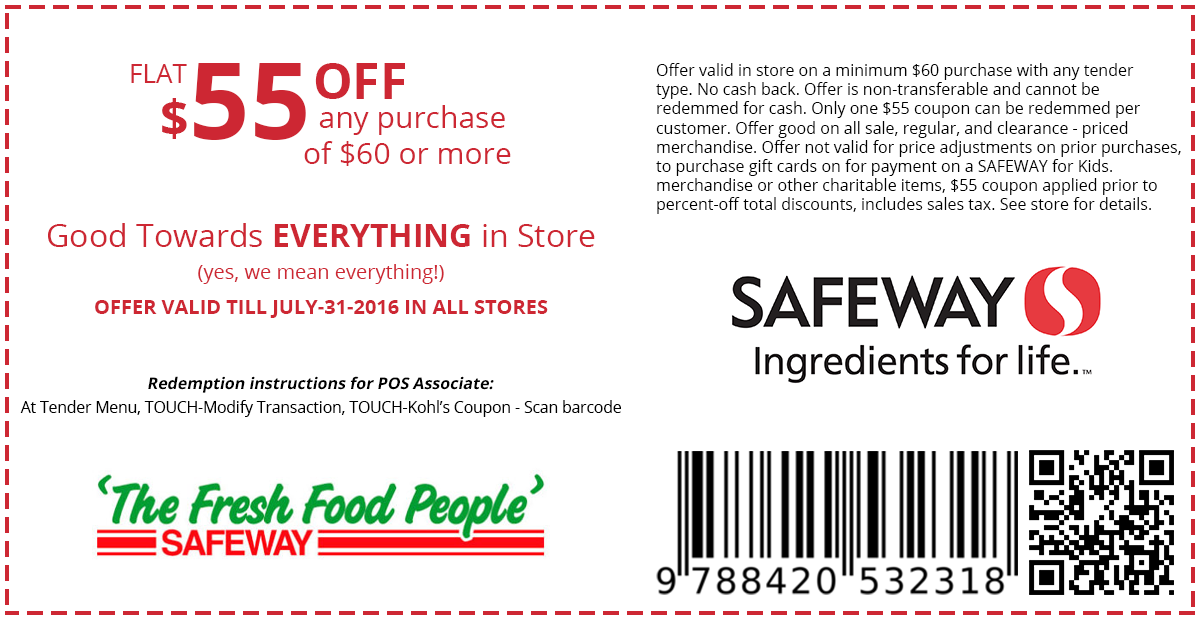
<style>
.page{position:relative;width:1200px;height:620px;background:#ffffff}
.page>*{position:absolute;margin:0}
.t1{font:26px "OpenSans";color:#cd2733}
.t2{font:106px "OpenSans-Bold";color:#cd2733}
.t3{font:50px "OpenSans-Bold";color:#cd2733}
.t4{font:16px "OpenSans";color:#000000}
.t5{font:30px "OpenSans";color:#cd2733}
.t6{font:32px "OpenSans";color:#cd2733}
.t7{font:32px "OpenSans-Bold";color:#cd2733}
.t8{font:20px "OpenSans";color:#cd2733}
.t9{font:20px "OpenSans-Bold";color:#cd2733}
.t10{font:16px "OpenSans-Bold";color:#000000;font-style:italic}
.t11{font:15.5px "OpenSans";color:#000000}
</style>
<div class="page">
<p class="t1" style="left:131px;top:64px;width:56px;height:19px">FLAT</p>
<p class="t2" style="left:194px;top:63px;width:112px;height:77px">55</p>
<p class="t3" style="left:315px;top:63px;width:90px;height:36px">OFF</p>
<p class="t4" style="left:656px;top:63px;width:525px;height:151px">Offer valid in store on a minimum $60 purchase with any tender<br>type. No cash back. Offer is non-transferable and cannot be<br>redemmed for cash. Only one $55 coupon can be redemmed per<br>customer. Offer good on all sale, regular, and clearance - priced<br>merchandise. Offer not valid for price adjustments on prior purchases,<br>to purchase gift cards on for payment on a SAFEWAY for Kids.<br>merchandise or other charitable items, $55 coupon applied prior to<br>percent-off total discounts, includes sales tax. See store for details.</p>
<p class="t3" style="left:162px;top:98px;width:25px;height:41px">$</p>
<p class="t5" style="left:304px;top:105px;width:207px;height:61px">any purchase<br>of $60 or more</p>
<p class="t6" style="left:48px;top:223px;width:547px;height:24px">Good Towards <span class="t7">EVERYTHING</span> in Store</p>
<p class="t8" style="left:198px;top:264px;width:246px;height:20px">(yes, we mean everything!)</p>
<p class="t9" style="left:95px;top:300px;width:453px;height:18px">OFFER VALID TILL JULY-31-2016 IN ALL STORES</p>
<p class="t10" style="left:148px;top:376px;width:346px;height:17px">Redemption instructions for POS Associate:</p>
<p class="t11" style="left:20px;top:400px;width:601px;height:17px">At Tender Menu, TOUCH-Modify Transaction, TOUCH-Kohl’s Coupon - Scan barcode</p>
</div>
